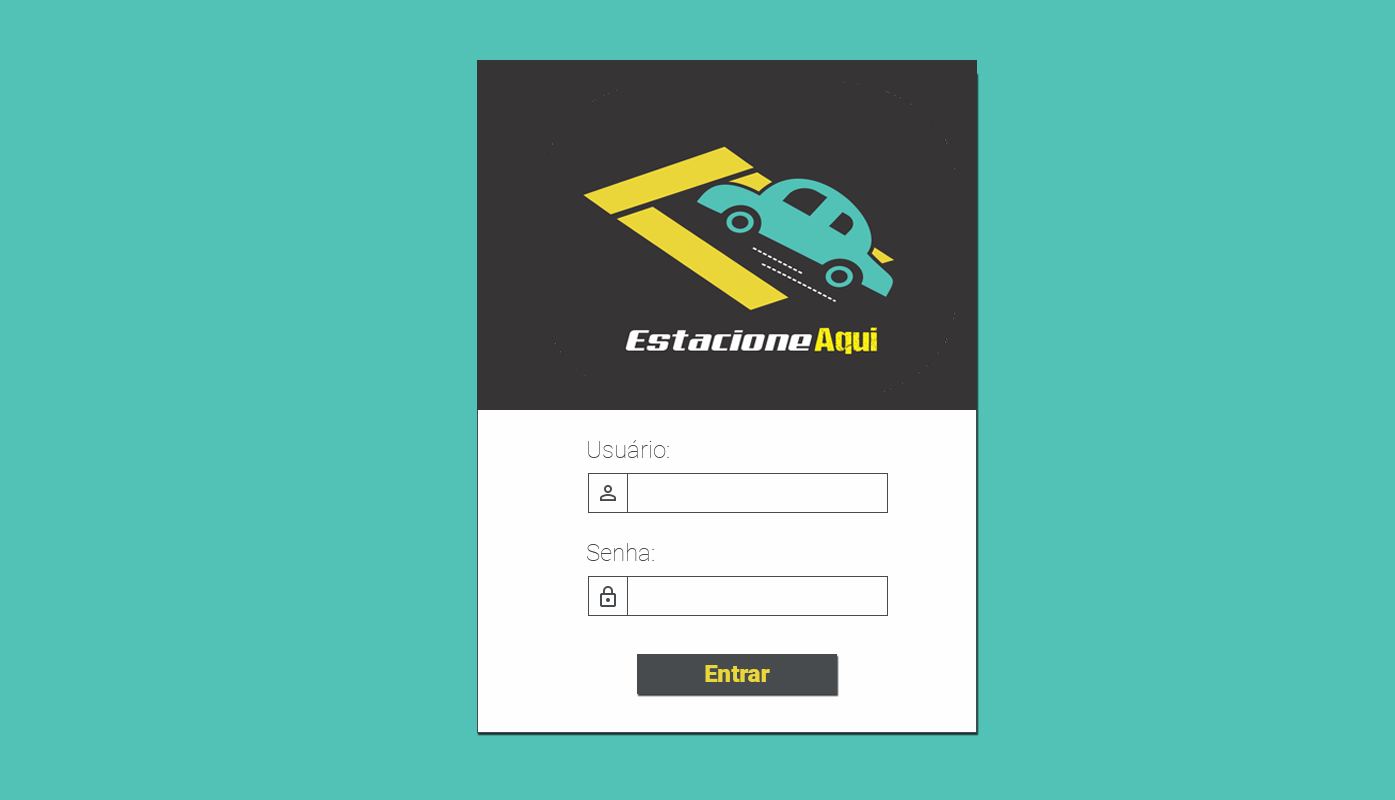
<style>
.page{position:relative;width:1395px;height:800px;background:#52c1b6}
.page>*{position:absolute;margin:0}
.t1{font:24px "Roboto-Thin";color:#484b4d}
.t2{font:24px "Roboto-Black";color:#ebd63a}
</style>
<div class="page">
<p class="t1" style="left:588px;top:440px;width:81px;height:18px">Usuário:</p>
<p class="t1" style="left:587px;top:543px;width:67px;height:18px">Senha:</p>
<p class="t2" style="left:705px;top:665px;width:65px;height:17px">Entrar</p>
</div>
